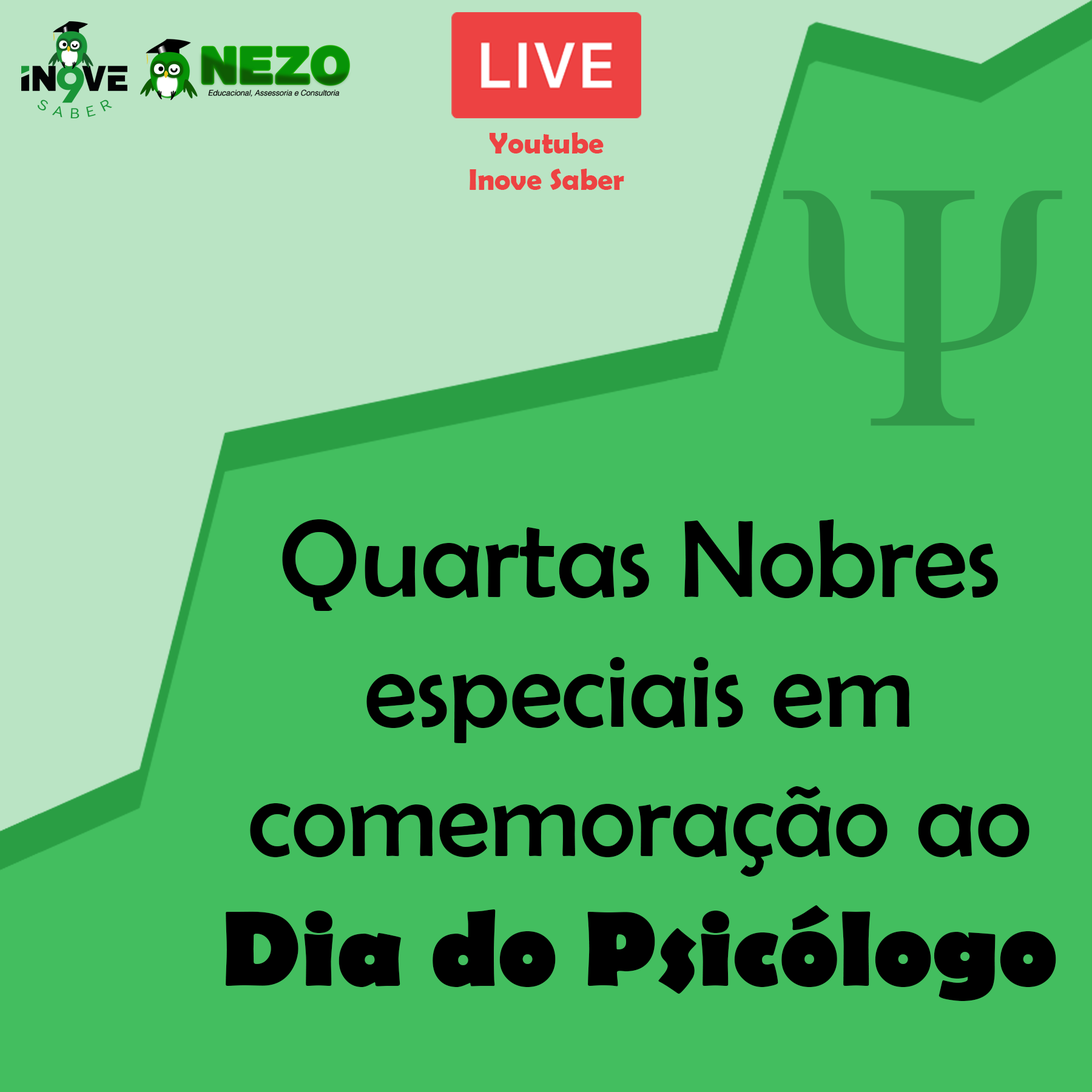
<style>
.page{position:relative;width:1092px;height:1092px;background:#43be5f}
.page>*{position:absolute;margin:0}
.t1{font:30.3px "BerlinSansFBDemi-Bold";color:#ed4242}
.t2{font:107.9px "BerlinSansFB-Reg";color:#000000}
.t3{font:110.8px "BerlinSansFB-Reg";color:#000000}
.t4{font:107.9px "BerlinSansFB-Bold";color:#000000}
</style>
<div class="page">
<p class="t1" style="left:470px;top:132px;width:154px;height:58px;text-align:center">Youtube<br>Inove Saber</p>
<p class="t2" style="left:226px;top:519px;width:830px;height:482px;text-align:center"><span class="t3">Quartas Nobres </span>especiais em comemoração ao <span class="t4">Dia do Psicólogo</span></p>
</div>
